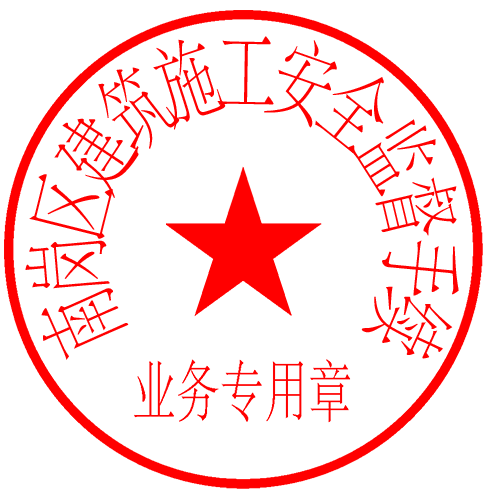
<style>
.page{position:relative;width:488px;height:501px;background:#ffffff}
.page>*{position:absolute;margin:0}
.t1{font:88.4px "FZLTSK--GBK1-0";letter-spacing:-0.165em;color:#ff0000;text-transform:uppercase;scale:0.67 1}
</style>
<div class="page">
<p class="t1" style="left:25px;top:36px;width:434px;height:324px;rotate:-90deg">南岗区建筑施工安全监督手续</p>
</div>
